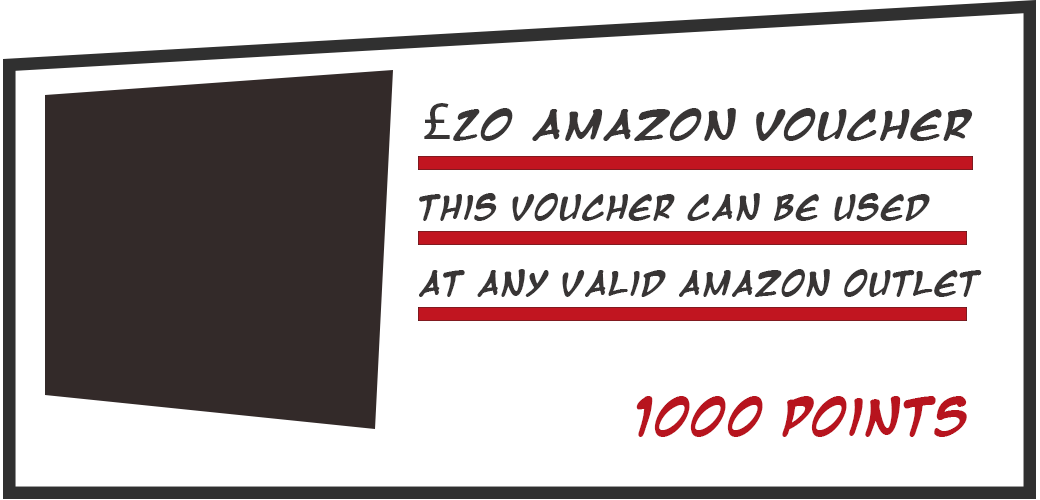
<style>
.page{position:relative;width:1040px;height:500px;background:#ffffff}
.page>*{position:absolute;margin:0}
.t1{font:33.9px "MangaTempleBold";color:#383535;scale:1.13 1}
.t2{font:54.3px "MyriadPro-Regular";color:#383535;scale:1.13 1}
.t3{font:28.2px "MangaTempleBold";color:#383535}
.t4{font:41.7px "MangaTempleBold";color:#b7141e}
</style>
<div class="page">
<p class="t1" style="left:424px;top:103px;width:549px;height:38px"><span class="t2">£</span>20 Amazon Voucher</p>
<p class="t3" style="left:419px;top:193px;width:511px;height:28px">This voucher can be used</p>
<p class="t3" style="left:419px;top:269px;width:563px;height:28px">at any valid amazon outlet</p>
<p class="t4" style="left:636px;top:396px;width:331px;height:41px">1000 Points</p>
</div>
